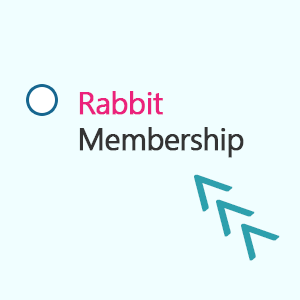
<style>
.page{position:relative;width:300px;height:300px;background:#f0feff}
.page>*{position:absolute;margin:0}
.t1{font:30px "MalgunGothicRegular";letter-spacing:-0.04em;color:#343434;font-weight:bold}
.t2{font:30px "MalgunGothicRegular";letter-spacing:-0.04em;color:#eb227c;font-weight:bold}
.t3{font:75px "MalgunGothicRegular";letter-spacing:-0.04em;color:#2da0ad;font-weight:bold}
</style>
<div class="page">
<p class="t1" style="left:79px;top:91px;width:165px;height:67px"><span class="t2">Rabbit<br></span>Membership</p>
<p class="t3" style="left:194px;top:174px;width:39px;height:38px;rotate:49deg">&lt;</p>
<p class="t3" style="left:216px;top:199px;width:39px;height:38px;rotate:49deg">&lt;</p>
<p class="t3" style="left:241px;top:223px;width:39px;height:38px;rotate:49deg">&lt;</p>
</div>
